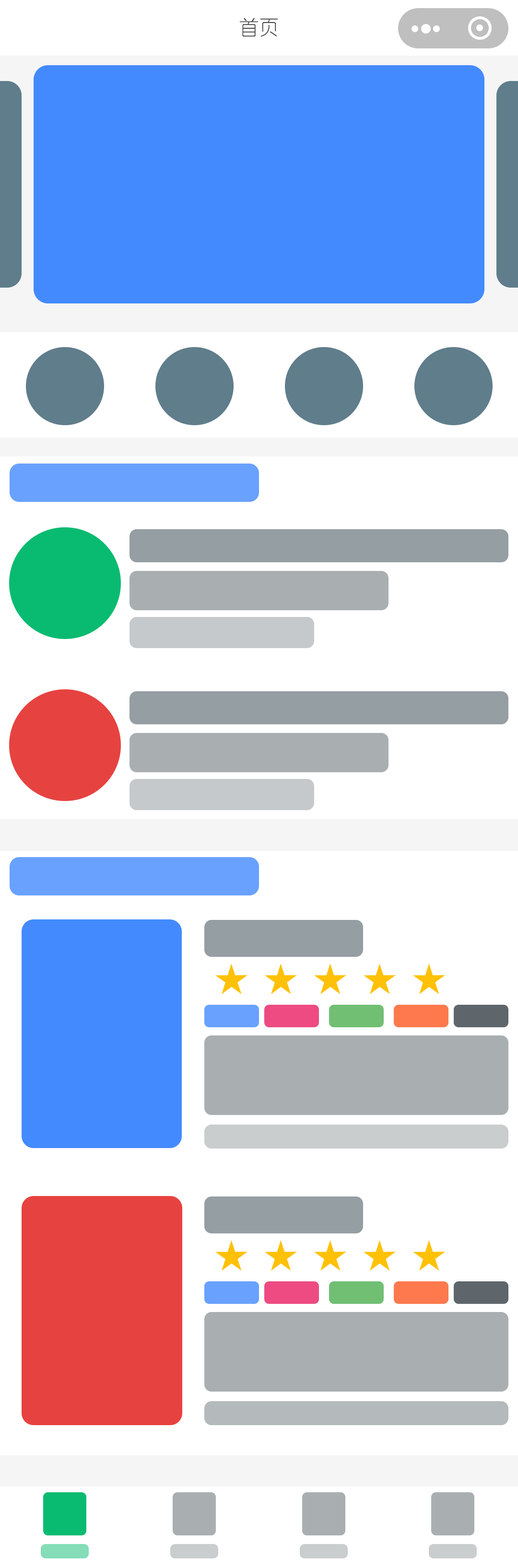
<style>
.page{position:relative;width:518px;height:1568px;background:#ffffff}
.page>*{position:absolute;margin:0}
.t1{font:20px "-";color:#444444}
</style>
<div class="page">
<p class="t1" style="left:239px;top:18px;width:39px;height:19px">首页</p>
</div>
